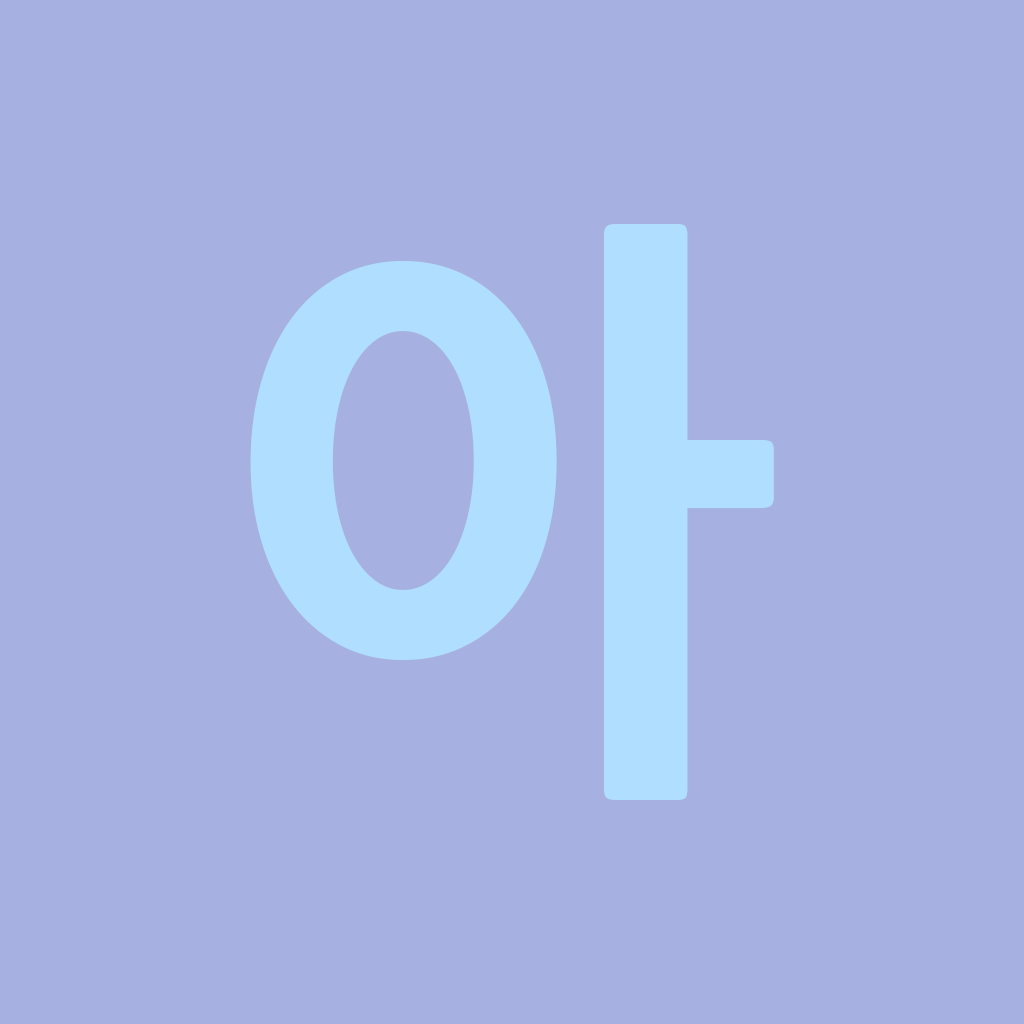
<style>
.page{position:relative;width:1024px;height:1024px;background:#a6b1e1}
.page>*{position:absolute;margin:0}
.t1{font:600px "NanumGothicExtraBold";color:#b0deff}
</style>
<div class="page">
<p class="t1" style="left:250px;top:224px;width:524px;height:576px">아</p>
</div>
